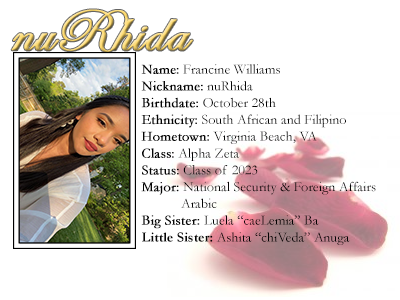
<style>
.page{position:relative;width:400px;height:300px;background:#ffffff}
.page>*{position:absolute;margin:0}
.t1{font:60px "EdwardianScriptITC";font-weight:bold}
.t2{font:14px "Garamond";color:#000000}
.t3{font:14px "Garamond";color:#000000;font-weight:bold}
.t4{font:14px "Garamond-Bold";color:#000000}
</style>
<div class="page">
<p class="t1" style="left:11px;top:9px;width:182px;height:43px">nuRhida</p>
<p class="t2" style="left:141px;top:64px;width:235px;height:181px"><span class="t3">Name:</span> Francine Williams<br><span class="t3">Nickname:</span> nuRhida<br><span class="t3">Birthdate:</span> October 28th<br><span class="t3">Ethnicity:</span> South African and Filipino<br><span class="t3">Hometown:</span> Virginia Beach, VA<br><span class="t3">Class:</span> Alpha Zeta<br><span class="t3">Status:</span> Class of 2023<br><span class="t3">Major:</span> National Security &amp; Foreign Affairs<br>  Arabic<br><span class="t3">Big Sister: </span>Luela “caeLemia” Ba<br><span class="t4">Little Sister:</span> Ashita “chiVeda” Anuga</p>
</div>
